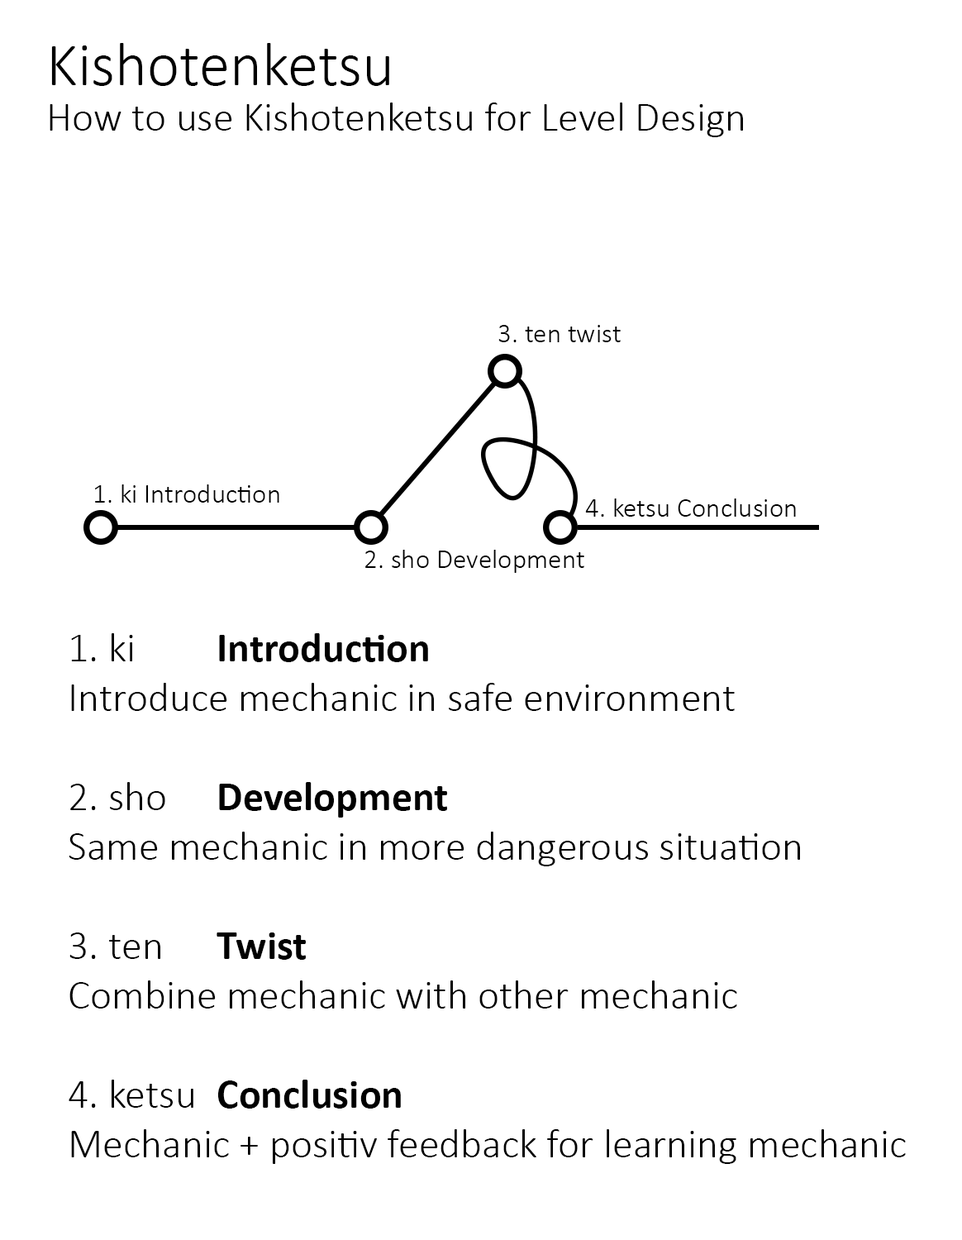
<style>
.page{position:relative;width:962px;height:1240px;background:#ffffff}
.page>*{position:absolute;margin:0}
.t1{font:62px "Calibri-Light";color:#000000}
.t2{font:41.3px "Calibri-Light";color:#000000}
.t3{font:27.5px "Calibri-Light";color:#000000}
.t4{font:41.3px "Calibri-Bold";color:#000000}
</style>
<div class="page">
<p class="t1" style="left:51px;top:43px;width:338px;height:43px">Kishotenketsu</p>
<p class="t2" style="left:50px;top:102px;width:693px;height:35px">How to use Kishotenketsu for Level Design</p>
<p class="t3" style="left:498px;top:325px;width:123px;height:17px">3. ten twist</p>
<p class="t3" style="left:95px;top:484px;width:184px;height:18px">1. ki Introduction</p>
<p class="t3" style="left:585px;top:498px;width:211px;height:19px">4. ketsu Conclusion</p>
<p class="t3" style="left:365px;top:550px;width:219px;height:23px">2. sho Development</p>
<p class="t2" style="left:69px;top:633px;width:837px;height:531px">1. ki   <span class="t4">Introduction<br></span>Introduce mechanic in safe environment<br><br>2. sho  <span class="t4">Development<br></span>Same mechanic in more dangerous situation<br><br>3. ten  <span class="t4">Twist<br></span>Combine mechanic with other mechanic <br><br>4. ketsu <span class="t4">Conclusion<br></span>Mechanic + positiv feedback for learning mechanic</p>
</div>
